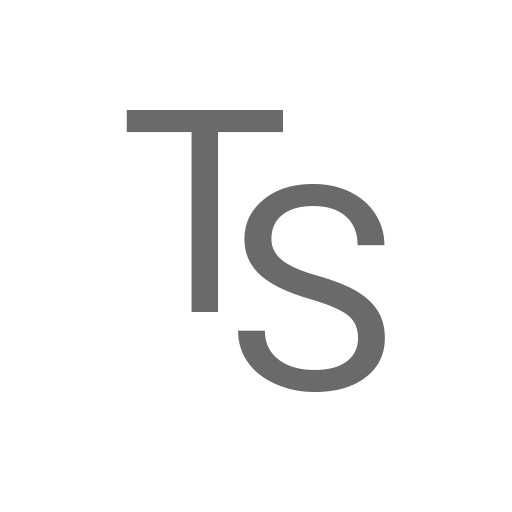
<style>
.page{position:relative;width:512px;height:512px;background:#ffffff}
.page>*{position:absolute;margin:0}
.t1{font:284.4px "Roboto-Regular";color:#6a6a6a}
</style>
<div class="page">
<p class="t1" style="left:126px;top:110px;width:157px;height:202px">T</p>
<p class="t1" style="left:238px;top:184px;width:147px;height:208px">S</p>
</div>
